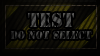
<style>
.page{position:relative;width:100px;height:56px}
.page>*{position:absolute;margin:0}
.t1{font:10px "StencilStd"}
.t2{font:18px "StencilStd"}
</style>
<div class="page">
<p class="t1" style="left:11px;top:13px;width:81px;height:26px;text-align:center"><span class="t2">TEST<br></span>do not select</p>
</div>
